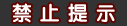
<style>
.page{position:relative;width:127px;height:26px;background:#333333}
.page>*{position:absolute;margin:0}
.t1{font:20px "JCuYuan";letter-spacing:0.4em;color:#ffffff}
</style>
<div class="page">
<p class="t1" style="left:12px;top:3px;width:103px;height:20px">禁止提示</p>
</div>
